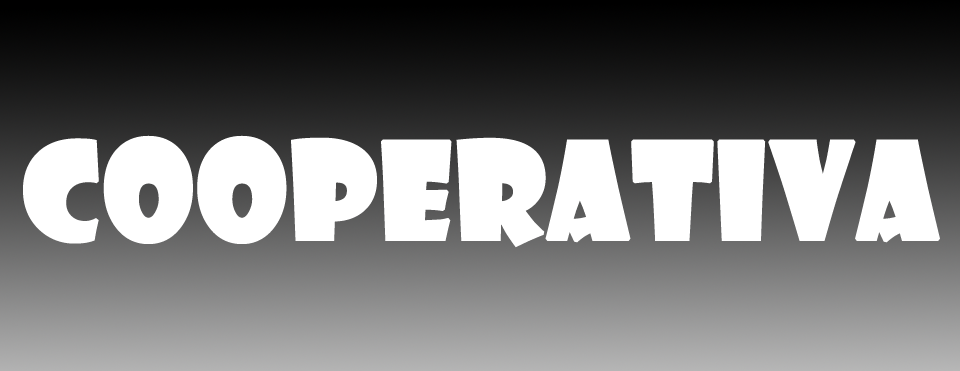
<style>
.page{position:relative;width:960px;height:371px}
.page>*{position:absolute;margin:0}
.t1{font:130px "ShowcardGothic-Reg";color:#ffffff;font-weight:bold}
</style>
<div class="page">
<p class="t1" style="left:23px;top:135px;width:917px;height:113px">Cooperativa</p>
</div>
